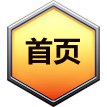
<style>
.page{position:relative;width:107px;height:107px;background:#ffffff}
.page>*{position:absolute;margin:0}
.t1{font:28px "MicrosoftYaHei";color:#150606}
</style>
<div class="page">
<p class="t1" style="left:25px;top:37px;width:56px;height:28px">首页</p>
</div>
